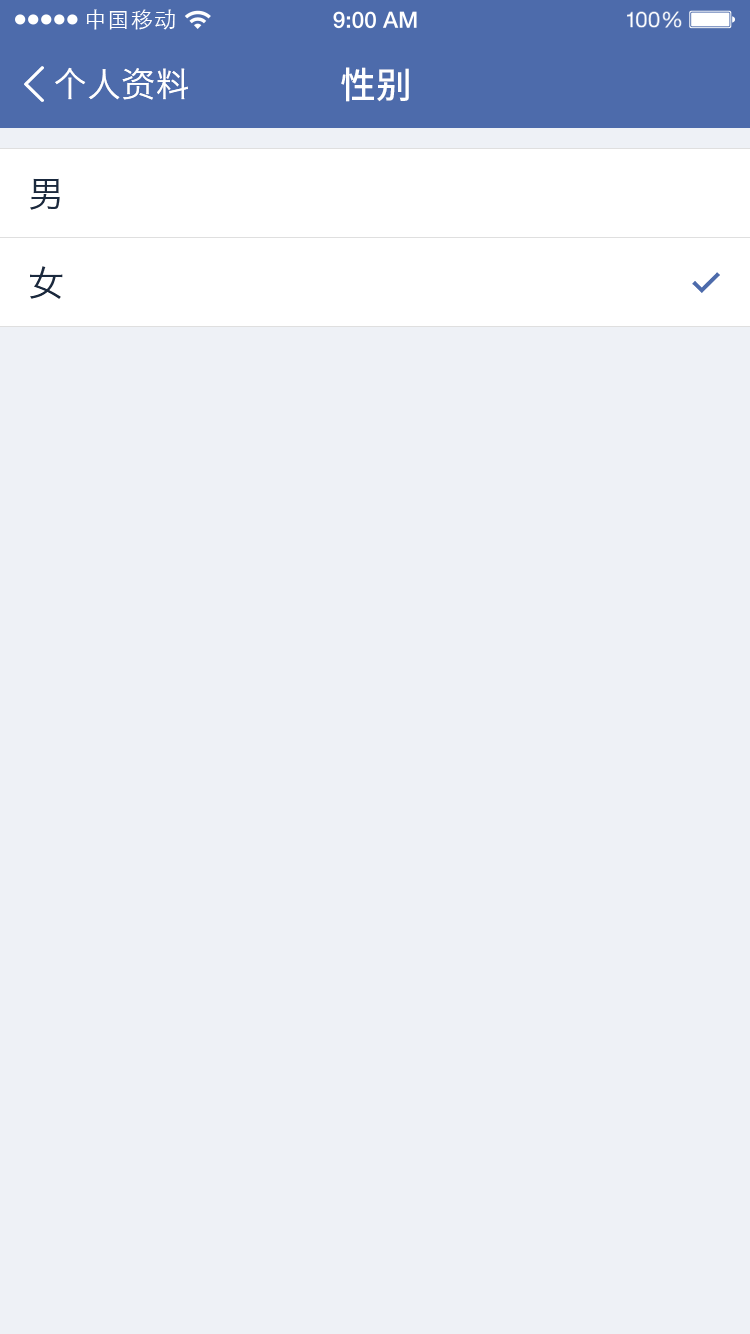
<style>
.page{position:relative;width:750px;height:1334px;background:#eef1f6}
.page>*{position:absolute;margin:0}
.t1{font:21.9px "STXihei";letter-spacing:0.04em;color:#ffffff}
.t2{font:34px "HiraginoSansGB-W3";color:#ffffff}
.t3{font:36px "NotoSansHans-Medium";color:#ffffff}
.t4{font:36px "HiraginoSansGB-W3";color:#1a293e}
</style>
<div class="page">
<p class="t1" style="left:86px;top:9px;width:89px;height:21px">中国移动</p>
<p class="t2" style="left:55px;top:67px;width:133px;height:33px">个人资料</p>
<p class="t3" style="left:341px;top:67px;width:68px;height:35px">性别</p>
<p class="t4" style="left:30px;top:178px;width:30px;height:32px">男</p>
<p class="t4" style="left:30px;top:266px;width:33px;height:33px">女</p>
</div>
